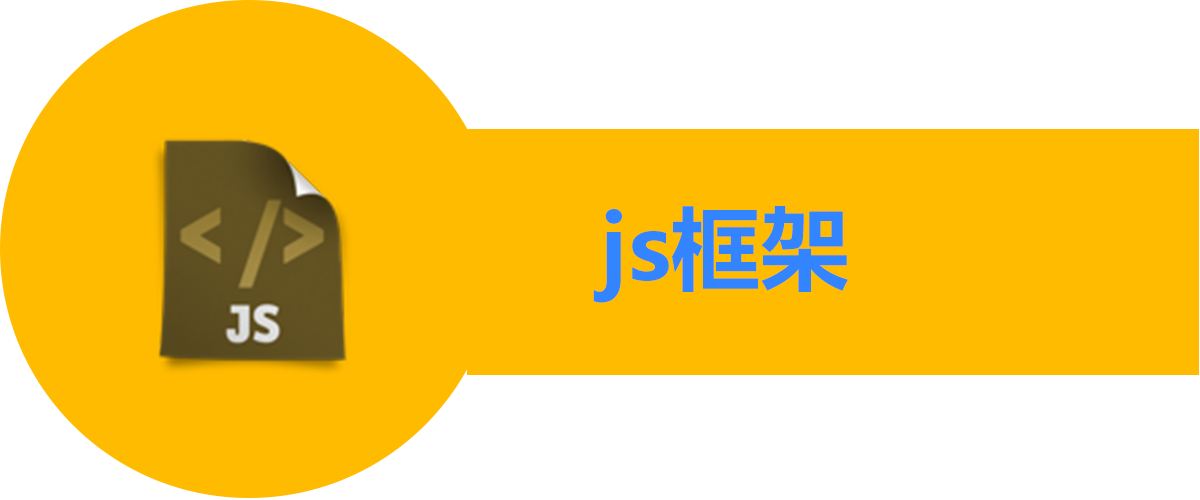
<style>
.page{position:relative;width:1200px;height:500px;background:#ffbb00}
.page>*{position:absolute;margin:0}
.t1{font:89.1px "MicrosoftYaHei-Bold";color:#3285ff}
</style>
<div class="page">
<p class="t1" style="left:593px;top:206px;width:255px;height:97px">js框架</p>
</div>
